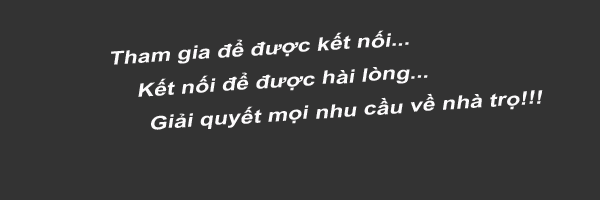
<style>
.page{position:relative;width:600px;height:200px;background:#333333}
.page>*{position:absolute;margin:0}
.t1{font:18.6px "Arial-BoldMT";color:#fcfbfc;font-style:italic;scale:1.24 1}
</style>
<div class="page">
<p class="t1" style="left:111px;top:30px;width:432px;height:100px;rotate:-4deg">Tham gia để được kết nối... <br><br>    Kết nối để được hài lòng...<br>  <br> Giải quyết mọi nhu cầu về nhà trọ!!!</p>
</div>
